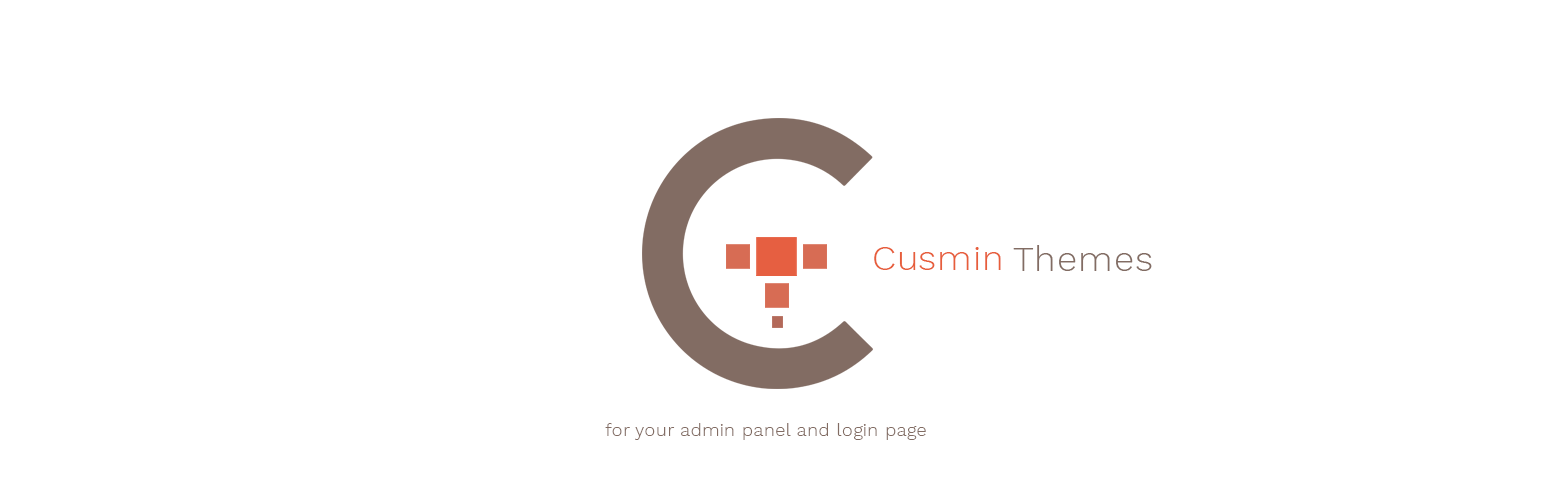
<style>
.page{position:relative;width:1544px;height:500px;background:#ffffff}
.page>*{position:absolute;margin:0}
.t1{font:36px "WorkSans-Light";letter-spacing:0.025em;color:#826c63}
.t2{font:36px "WorkSans-Light";letter-spacing:0.025em;color:#e75e3b}
.t3{font:18px "WorkSans-Light";letter-spacing:0.025em;color:#826c63}
</style>
<div class="page">
<p class="t1" style="left:1013px;top:245px;width:139px;height:26px">Themes</p>
<p class="t2" style="left:874px;top:247px;width:127px;height:23px">Cusmin</p>
<p class="t3" style="left:605px;top:423px;width:321px;height:17px">for your admin panel and login page</p>
</div>
